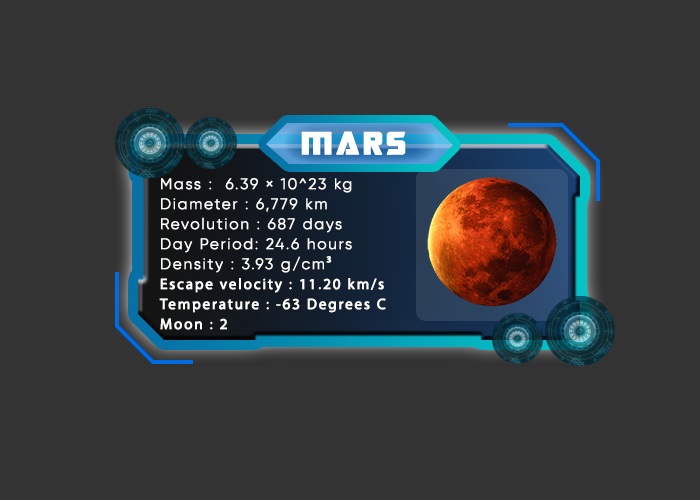
<style>
.page{position:relative;width:700px;height:500px;background:#333333}
.page>*{position:absolute;margin:0}
.t1{font:35px "TransformersMovie";letter-spacing:0.1em;color:#ffffff;font-weight:bold}
.t2{font:15px/20px "Gilroy-Light";letter-spacing:0.1em;color:#ffffff;font-weight:bold}
.t3{font:15px/20px "MyriadPro-Regular";letter-spacing:0.1em;color:#ffffff;font-weight:bold}
</style>
<div class="page">
<p class="t1" style="left:301px;top:131px;width:105px;height:24px">MARS</p>
<p class="t2" style="left:159px;top:178px;width:227px;height:152px">Mass :  6.39 × 10^23 kg<br>Diameter : 6,779 km<br>Revolution : 687 days<br>Day Period: 24.6 hours<br>Density : 3.93 g/cm<span class="t3">³<br>Escape velocity : 11.20 km/s<br>Temperature : -63 Degrees C<br>Moon : 2</span></p>
</div>
